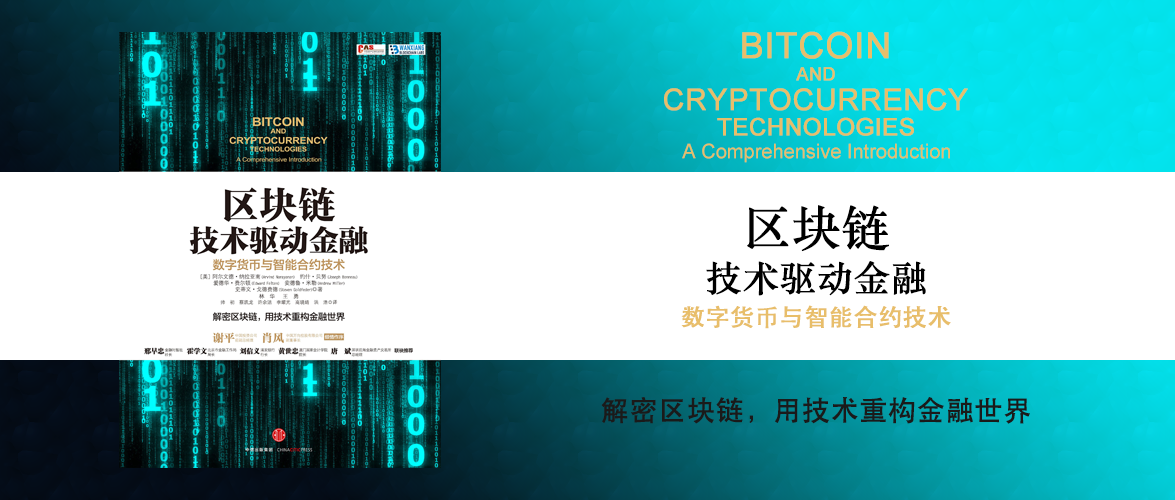
<style>
.page{position:relative;width:1175px;height:500px;background:#ffffff}
.page>*{position:absolute;margin:0}
.t1{font:36px "ArialMT";color:#e8be6a;font-weight:bold}
.t2{font:18px "ArialMT";color:#e8be6a;font-weight:bold}
.t3{font:30px "ArialMT";color:#e8be6a;font-weight:bold}
.t4{font:24px "ArialMT";color:#e8be6a;font-weight:bold}
.t5{font:20px "ArialMT";color:#e8be6a}
.t6{font:36px/56px "STSongti-SC-Bold";color:#000000;font-weight:bold}
.t7{font:48px/56px "STSongti-SC-Bold";color:#000000;font-weight:bold}
.t8{font:24px "STHeiti";color:#e8be6a;font-weight:bold}
.t9{font:28px "STHeiti";color:#1a1a1a;font-weight:bold}
</style>
<div class="page">
<p class="t1" style="left:742px;top:31px;width:147px;height:28px">BITCOIN</p>
<p class="t2" style="left:796px;top:67px;width:39px;height:14px">AND</p>
<p class="t3" style="left:664px;top:88px;width:304px;height:23px">CRYPTOCURRENCY</p>
<p class="t4" style="left:717px;top:117px;width:197px;height:19px">TECHNOLOGIES</p>
<p class="t5" style="left:682px;top:143px;width:268px;height:20px">A Comprehensive Introduction</p>
<p class="t6" style="left:706px;top:205px;width:220px;height:91px;text-align:center"><span class="t7">区块链<br></span>技术驱动金融</p>
<p class="t8" style="left:681px;top:305px;width:270px;height:24px">数字货币与智能合约技术</p>
<p class="t9" style="left:601px;top:397px;width:429px;height:27px">解密区块链，用技术重构金融世界</p>
</div>
